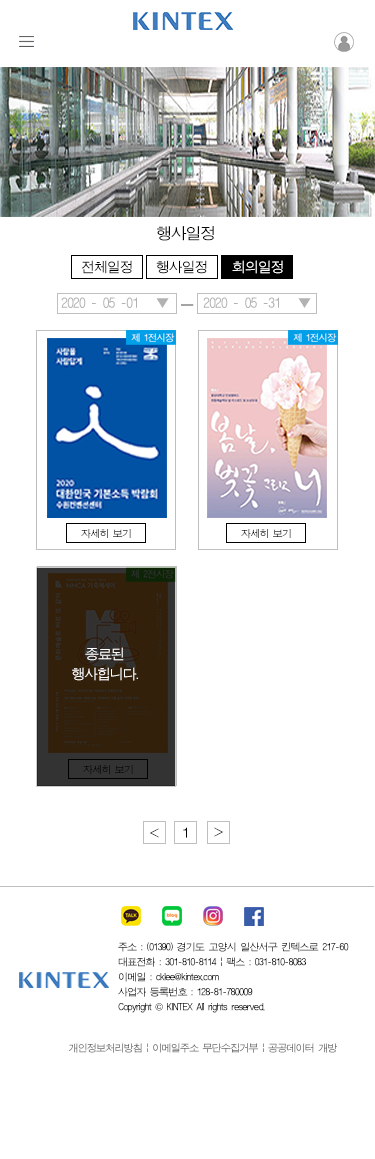
<style>
.page{position:relative;width:375px;height:1159px;background:#ffffff}
.page>*{position:absolute;margin:0}
.t1{font:16px "ÈÞ¸Õ°íµñ";letter-spacing:-0.08em;color:#060606}
.t2{font:14px "ÈÞ¸Õ°íµñ";letter-spacing:-0.08em;color:#010101}
.t3{font:14px "ÈÞ¸Õ°íµñ";letter-spacing:-0.08em;color:#000000}
.t4{font:14px "ÈÞ¸Õ°íµñ";letter-spacing:-0.08em;color:#ffffff}
.t5{font:14px "ÈÞ¸Õ°íµñ";letter-spacing:-0.08em;color:#b2b2b2}
.t6{font:14px "ÈÞ¸Õ°íµñ";letter-spacing:-0.08em}
.t7{font:14px/20px "ÈÞ¸Õ°íµñ";letter-spacing:-0.08em;color:#ffffff}
.t8{font:14px "ÈÞ¸Õ°íµñ";letter-spacing:-0.08em;color:#040404}
.t9{font:10px/15px "ÈÞ¸Õ°íµñ";letter-spacing:-0.08em;color:#020202}
.t10{font:10px/15px "Gulim";letter-spacing:-0.08em;color:#020202}
.t11{font:10px "ÈÞ¸Õ°íµñ";letter-spacing:-0.08em}
</style>
<div class="page">
<p class="t1" style="left:157px;top:226px;width:57px;height:15px">행사일정</p>
<p class="t2" style="left:81px;top:260px;width:51px;height:14px">전체일정</p>
<p class="t3" style="left:156px;top:260px;width:51px;height:14px">행사일정</p>
<p class="t4" style="left:232px;top:260px;width:51px;height:14px">회의일정</p>
<p class="t5" style="left:61px;top:297px;width:108px;height:11px">2020 - 05 -01   ▼</p>
<p class="t6" style="left:181px;top:304px;width:13px;height:2px">ㅡ</p>
<p class="t5" style="left:203px;top:297px;width:108px;height:11px">2020 - 05 -31   ▼</p>
<p class="t7" style="left:72px;top:647px;width:66px;height:34px;text-align:center">종료된<br>행사힙니다.</p>
<p class="t8" style="left:183px;top:827px;width:4px;height:11px">1</p>
<p class="t9" style="left:118px;top:942px;width:231px;height:71px">주소 : (01390) 경기도 고양시 일산서구 킨텍스로 217-60<br>대표전화 : 301-810-8114 | 팩스 : 031-810-8083<br>이메일 : cklee@kintex.com <br>사업자 등록번호 : 128-81-780009<br>Copyright <span class="t10">©</span> KINTEX All rights reserved.</p>
<p class="t11" style="left:68px;top:1043px;width:269px;height:10px">개인정보처리방침 | 이메일주소 무단수집거부 | 공공데이터 개방</p>
</div>
